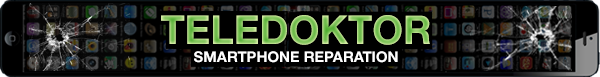
<style>
.page{position:relative;width:600px;height:77px;background:#000000}
.page>*{position:absolute;margin:0}
.t1{font:39.6px "HelveticaNeue-Bold"}
.t2{font:14.9px "HelveticaNeue-Bold";color:#ffffff}
</style>
<div class="page">
<p class="t1" style="left:161px;top:15px;width:269px;height:30px">TELEDOKTOR</p>
<p class="t2" style="left:194px;top:51px;width:204px;height:12px">SMARTPHONE REPARATION</p>
</div>
